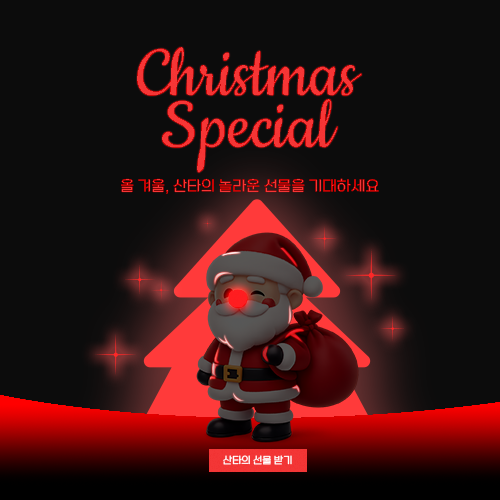
<style>
.page{position:relative;width:500px;height:500px;background:#0c0c0c}
.page>*{position:absolute;margin:0}
.t1{font:80px/52px "Cookie-Regular";color:#f63636}
.t2{font:15px "SBAggroL";color:#f63636}
.t3{font:10px "SBAggroL";color:#ffffff}
</style>
<div class="page">
<p class="t1" style="left:137px;top:47px;width:225px;height:126px;text-align:center">Christmas<br>Special</p>
<p class="t2" style="left:121px;top:178px;width:258px;height:16px">올 겨울, 산타의 놀라운 선물을 기대하세요</p>
<p class="t3" style="left:223px;top:455px;width:69px;height:10px">산타의 선물 받기</p>
</div>
